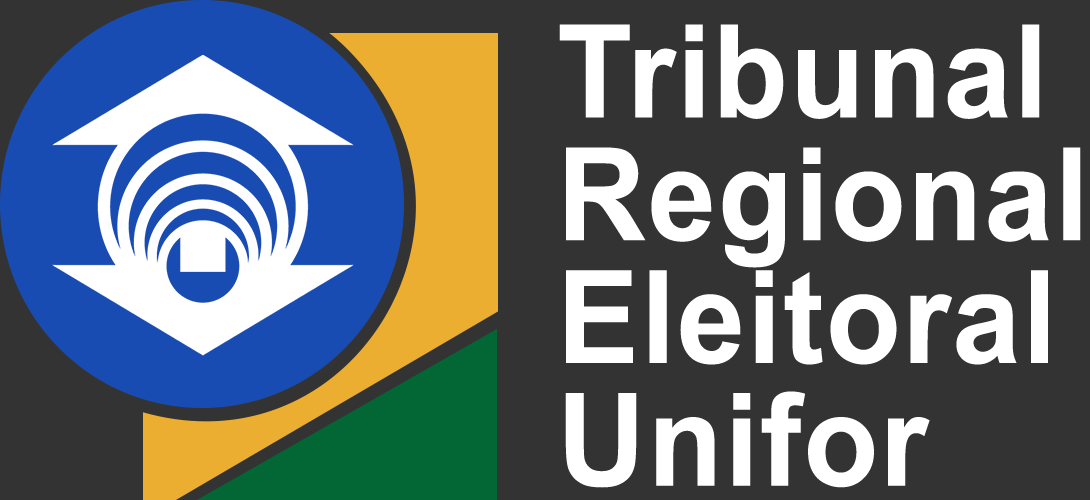
<style>
.page{position:relative;width:1090px;height:500px;background:#333333}
.page>*{position:absolute;margin:0}
.t1{font:129.3px/122.8px "Arial-BoldMT";letter-spacing:0.015em;color:#ffffff;scale:0.95 1}
</style>
<div class="page">
<p class="t1" style="left:559px;top:24px;width:522px;height:464px">Tribunal<br>Regional<br>Eleitoral<br>Unifor</p>
</div>
